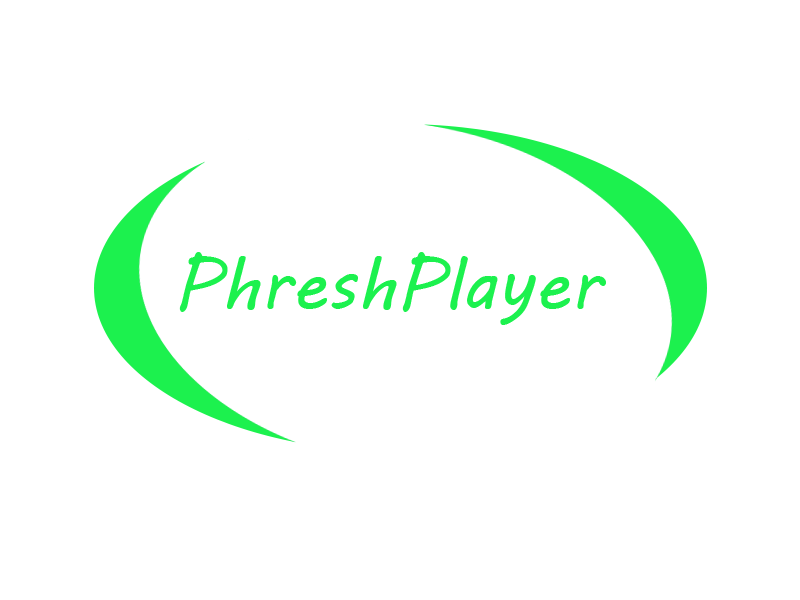
<style>
.page{position:relative;width:800px;height:600px;background:#ffffff}
.page>*{position:absolute;margin:0}
.t1{font:72px "MVBoli";color:#1cf14e}
</style>
<div class="page">
<p class="t1" style="left:179px;top:252px;width:427px;height:73px">PhreshPlayer</p>
</div>
